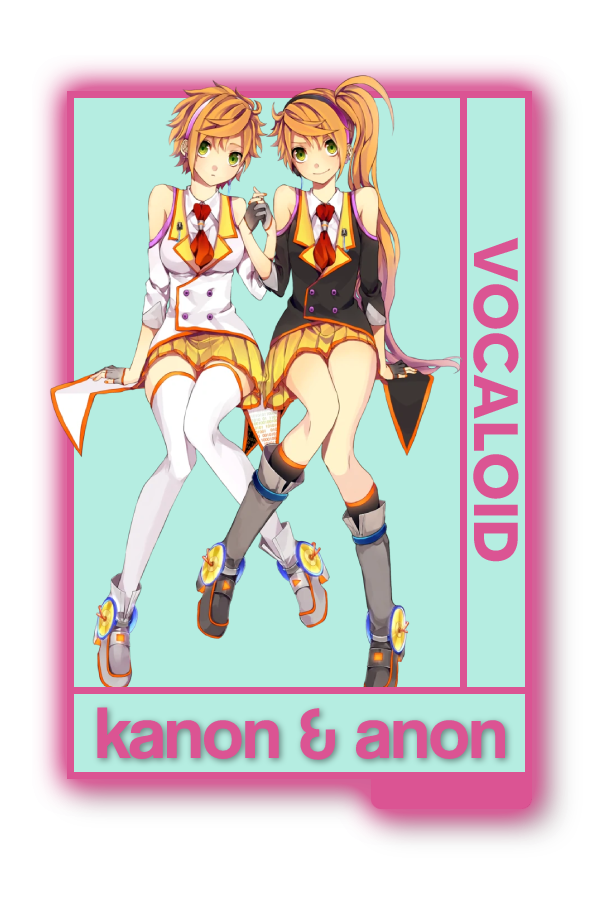
<style>
.page{position:relative;width:600px;height:900px;background:#b5ede1}
.page>*{position:absolute;margin:0}
.t1{font:62.5px "MADETOMMY-Bold";color:#db5493}
.t2{font:75px "CoolveticaRg-Regular";color:#db5493}
</style>
<div class="page">
<p class="t1" style="left:473px;top:237px;width:46px;height:325px;rotate:90deg">VOCALOID</p>
<p class="t2" style="left:97px;top:707px;width:408px;height:53px">kanon &amp; anon</p>
</div>
